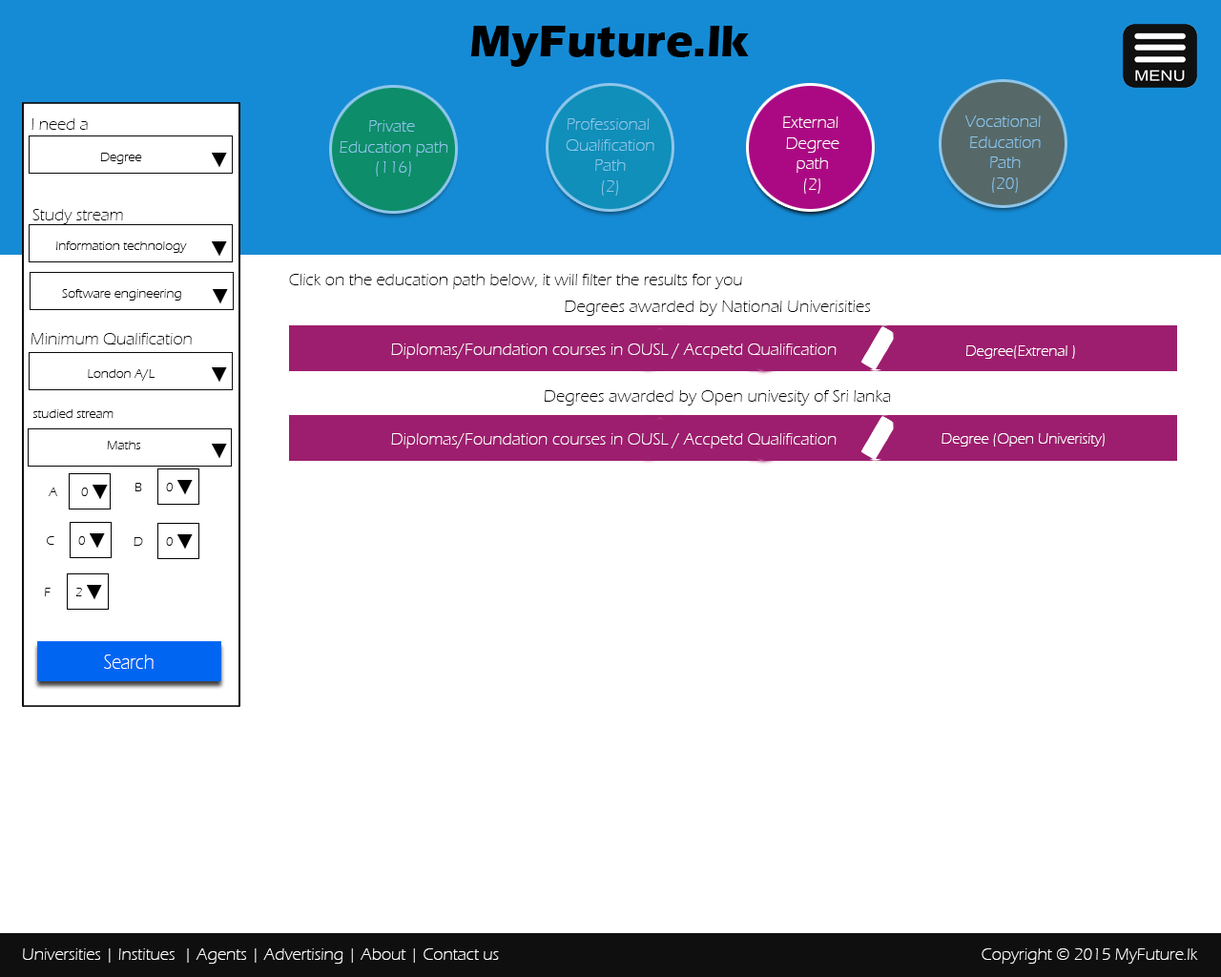
<style>
.page{position:relative;width:1221px;height:977px;background:#ffffff}
.page>*{position:absolute;margin:0}
.t1{font:45.8px "ErasITC-Bold";color:#000000}
.t2{font:17.2px "ErasITC-Light";color:#090909}
.t3{font:17.2px "ErasITC-Light";color:#8dc6ea}
.t4{font:17.2px "ErasITC-Light";color:#fffefe}
.t5{font:13.4px "ErasITC-Light";color:#090909}
.t6{font:17.2px "ErasITC-Light";color:#000000}
.t7{font:15px "ErasITC-Light";color:#fffefe}
.t8{font:21.6px "ErasITC-Light";color:#ffffff;scale:0.83 1}
.t9{font:17.2px "ErasITC-Light";color:#ffffff}
</style>
<div class="page">
<p class="t1" style="left:470px;top:26px;width:279px;height:41px">MyFuture.lk</p>
<p class="t2" style="left:31px;top:118px;width:57px;height:12px">I need a</p>
<p class="t3" style="left:340px;top:120px;width:108px;height:56px;text-align:center">Private <br>Education path<br>(116)</p>
<p class="t3" style="left:566px;top:118px;width:88px;height:78px;text-align:center">Professional <br>Qualification<br>Path<br>(2)</p>
<p class="t4" style="left:783px;top:116px;width:56px;height:78px;text-align:center">External <br>Degree<br>path<br>(2)</p>
<p class="t3" style="left:965px;top:115px;width:76px;height:78px;text-align:center">Vocational <br>Education<br>Path<br>(20)</p>
<p class="t5" style="left:100px;top:153px;width:42px;height:11px">Degree</p>
<p class="t2" style="left:32px;top:209px;width:91px;height:15px">Study stream</p>
<p class="t5" style="left:56px;top:241px;width:131px;height:12px">Information technology</p>
<p class="t6" style="left:289px;top:274px;width:453px;height:15px">Click on the education path below, it will filter the results for you</p>
<p class="t5" style="left:62px;top:289px;width:119px;height:11px">Software engineering</p>
<p class="t6" style="left:565px;top:300px;width:305px;height:16px">Degrees awarded by National Univerisities</p>
<p class="t2" style="left:31px;top:333px;width:161px;height:11px">Minimum Qualification</p>
<p class="t4" style="left:391px;top:343px;width:445px;height:16px">Diplomas/Foundation courses in OUSL / Accpetd Qualification</p>
<p class="t7" style="left:966px;top:345px;width:109px;height:14px">Degree(Extrenal )</p>
<p class="t5" style="left:88px;top:369px;width:67px;height:12px">London A/L</p>
<p class="t6" style="left:545px;top:390px;width:346px;height:15px">Degrees awarded by Open univesity of Sri lanka</p>
<p class="t5" style="left:32px;top:409px;width:82px;height:9px">studied stream</p>
<p class="t4" style="left:391px;top:433px;width:445px;height:15px">Diplomas/Foundation courses in OUSL / Accpetd Qualification</p>
<p class="t7" style="left:941px;top:433px;width:164px;height:13px">Degree (Open Univerisity)</p>
<p class="t5" style="left:107px;top:441px;width:33px;height:8px">Maths</p>
<p class="t5" style="left:134px;top:483px;width:8px;height:8px">B</p>
<p class="t5" style="left:166px;top:483px;width:7px;height:8px">0</p>
<p class="t5" style="left:49px;top:487px;width:8px;height:9px">A</p>
<p class="t5" style="left:81px;top:487px;width:7px;height:9px">0</p>
<p class="t5" style="left:47px;top:536px;width:7px;height:9px">C</p>
<p class="t5" style="left:78px;top:536px;width:7px;height:9px">0</p>
<p class="t5" style="left:134px;top:537px;width:9px;height:9px">D</p>
<p class="t5" style="left:166px;top:537px;width:7px;height:9px">0</p>
<p class="t5" style="left:45px;top:588px;width:6px;height:8px">F</p>
<p class="t5" style="left:75px;top:588px;width:7px;height:8px">2</p>
<p class="t8" style="left:104px;top:654px;width:50px;height:15px">Search</p>
<p class="t9" style="left:23px;top:948px;width:476px;height:15px">Universities | Institues  | Agents | Advertising | About | Contact us</p>
<p class="t9" style="left:981px;top:948px;width:217px;height:15px">Copyright © 2015 MyFuture.lk</p>
</div>
